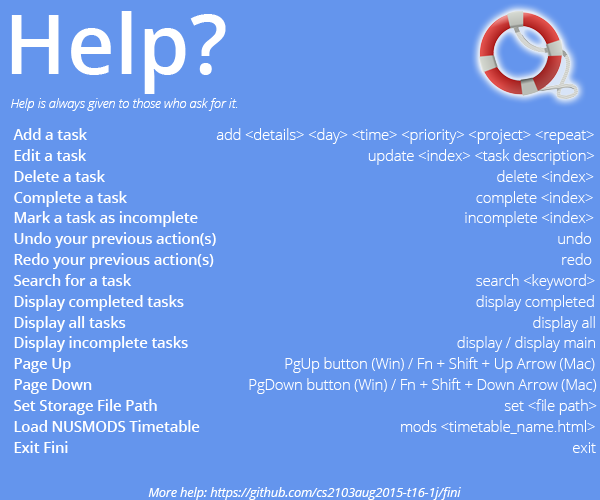
<style>
.page{position:relative;width:600px;height:500px;background:#6495ed}
.page>*{position:absolute;margin:0}
.t1{font:83.3px "OpenSans-Semibold";color:#ffffff}
.t2{font:12.5px "OpenSansLight-Italic";color:#ffffff}
.t3{font:14.6px/20.8px "OpenSans-Light";color:#ffffff}
.t4{font:14.6px/20.8px "OpenSans-Semibold";color:#ffffff}
.t5{font:12.5px "OpenSans-Italic";color:#ffffff}
</style>
<div class="page">
<p class="t1" style="left:11px;top:11px;width:215px;height:83px">Help?</p>
<p class="t2" style="left:11px;top:98px;width:227px;height:13px">Help is always given to those who ask for it.</p>
<p class="t3" style="left:13px;top:128px;width:584px;height:325px"><span class="t4">Add a task</span>             add &lt;details&gt; &lt;day&gt; &lt;time&gt; &lt;priority&gt; &lt;project&gt; &lt;repeat&gt;<br><span class="t4">Edit a task</span>                       update &lt;index&gt; &lt;task description&gt;<br><span class="t4">Delete a task                               </span>delete &lt;index&gt;<br><span class="t4">Complete a task</span>                        complete &lt;index&gt;<br><span class="t4">Mark a task as incomplete</span>                   incomplete &lt;index&gt;<br><span class="t4">Undo your previous action(s)</span>                  undo<br><span class="t4">Redo your previous action(s)              </span>redo<br><span class="t4">Search for a task</span>                  search &lt;keyword&gt;<br><span class="t4">Display completed tasks                   </span>display completed<br><span class="t4">Display all tasks</span>                display all<br><span class="t4">Display incomplete tasks</span>                display / display main<br><span class="t4">Page Up</span>              PgUp button (Win) / Fn + Shift + Up Arrow (Mac)<br><span class="t4">Page Down</span>               PgDown button (Win) / Fn + Shift + Down Arrow (Mac)<br><span class="t4">Set Storage File Path</span>               set &lt;file path&gt;<br><span class="t4">Load NUSMODS Timetable</span>            mods &lt;timetable_name.html&gt;<br><span class="t4">Exit Fini</span>                            exit</p>
<p class="t5" style="left:148px;top:487px;width:313px;height:13px">More help: https://github.com/cs2103aug2015-t16-1j/fini</p>
</div>
